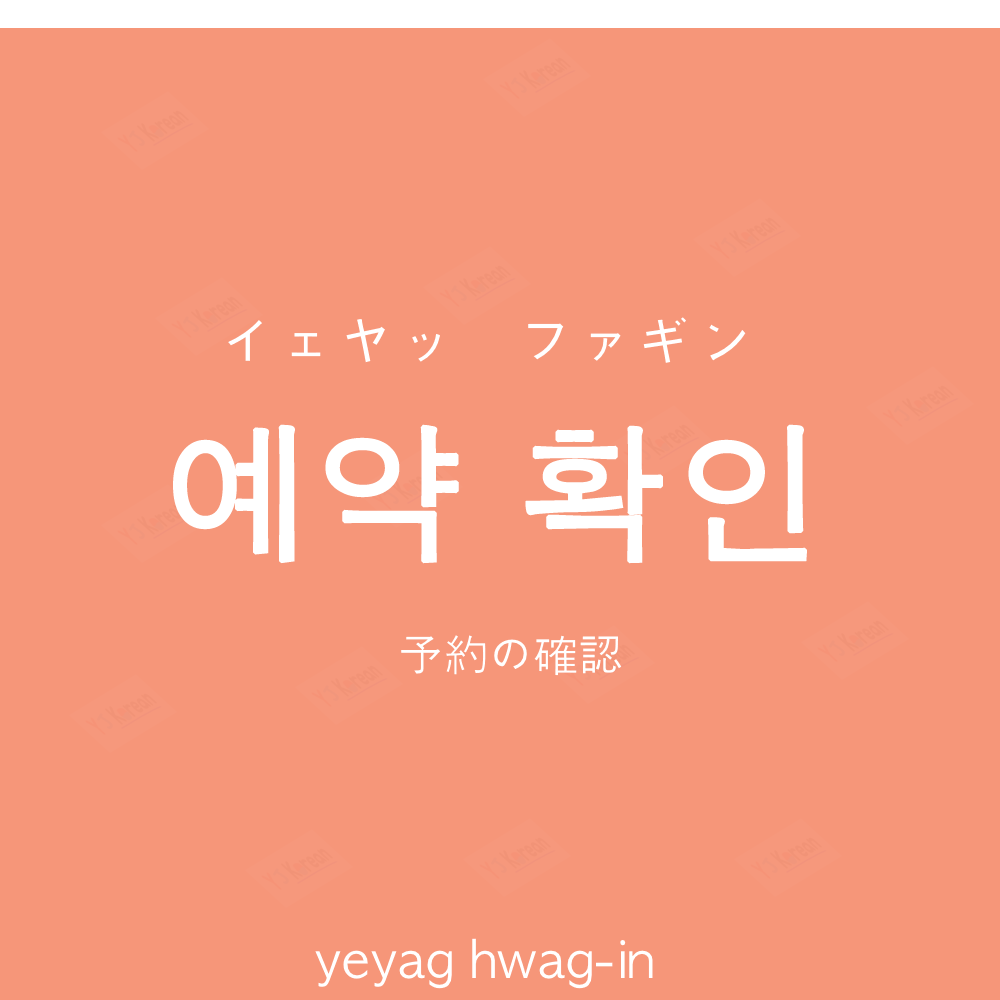
<style>
.page{position:relative;width:1000px;height:1000px;background:#f69679}
.page>*{position:absolute;margin:0}
.t1{font:60px "AppleGothic";color:#ffffff}
.t2{font:150px "AppleGothic";color:#ffffff;font-weight:bold}
.t3{font:45px "AppleGothic";color:#ffffff}
.t4{font:50px "AppleGothic";color:#ffffff}
</style>
<div class="page">
<p class="t1" style="left:228px;top:317px;width:518px;height:46px">イェヤッ　ファギン</p>
<p class="t2" style="left:173px;top:424px;width:634px;height:140px">예약 확인</p>
<p class="t3" style="left:401px;top:635px;width:221px;height:41px">予約の確認</p>
<p class="t4" style="left:315px;top:938px;width:338px;height:51px">yeyag hwag-in</p>
</div>
